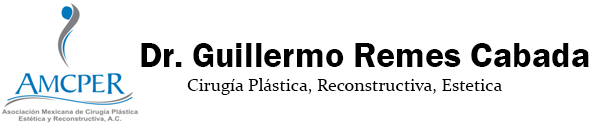
<style>
.page{position:relative;width:600px;height:133px;background:#ffffff}
.page>*{position:absolute;margin:0}
.t1{font:36px "FranklinGothic-Demi";color:#000000}
.t2{font:18px "Constantia";color:#000000}
</style>
<div class="page">
<p class="t1" style="left:141px;top:43px;width:448px;height:24px">Dr. Guillermo Remes Cabada</p>
<p class="t2" style="left:187px;top:78px;width:315px;height:17px">Cirugía Plástica, Reconstructiva, Estetica</p>
</div>
